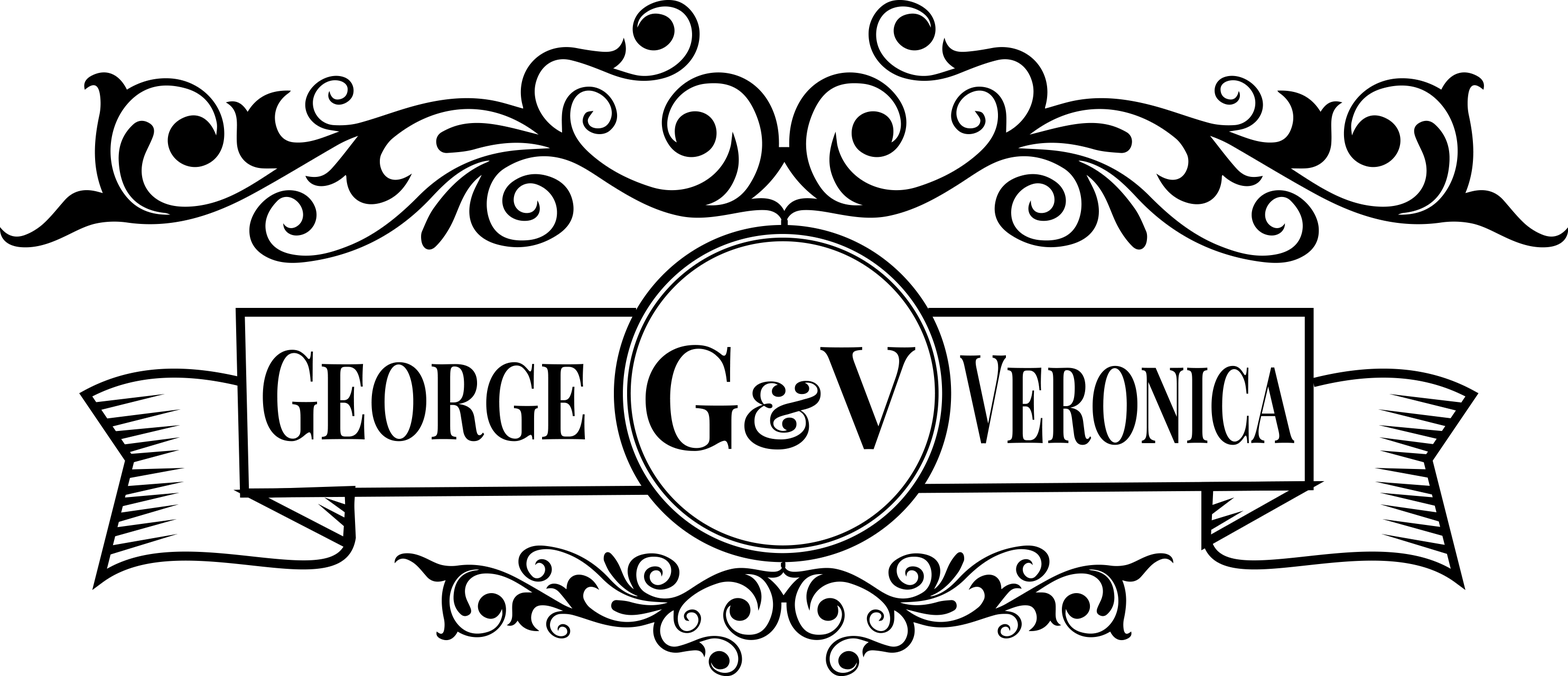
<style>
.page{position:relative;width:1568px;height:676px;background:#ffffff}
.page>*{position:absolute;margin:0}
.t1{font:124.1px "PlayfairDisplaySC-Bold";color:#000000;scale:0.65 1}
.t2{font:143.9px "PlayfairDisplaySC-Bold";color:#000000;scale:0.95 1}
.t3{font:94.9px "PlayfairDisplaySC-Bold";color:#000000;scale:0.95 1}
.t4{font:124.1px "PlayfairDisplaySC-Bold";color:#000000;scale:0.53 1}
</style>
<div class="page">
<p class="t1" style="left:263px;top:350px;width:322px;height:92px">George</p>
<p class="t2" style="left:646px;top:345px;width:270px;height:106px">G<span class="t3">&amp;</span>V</p>
<p class="t4" style="left:960px;top:355px;width:334px;height:90px">Veronica</p>
</div>
